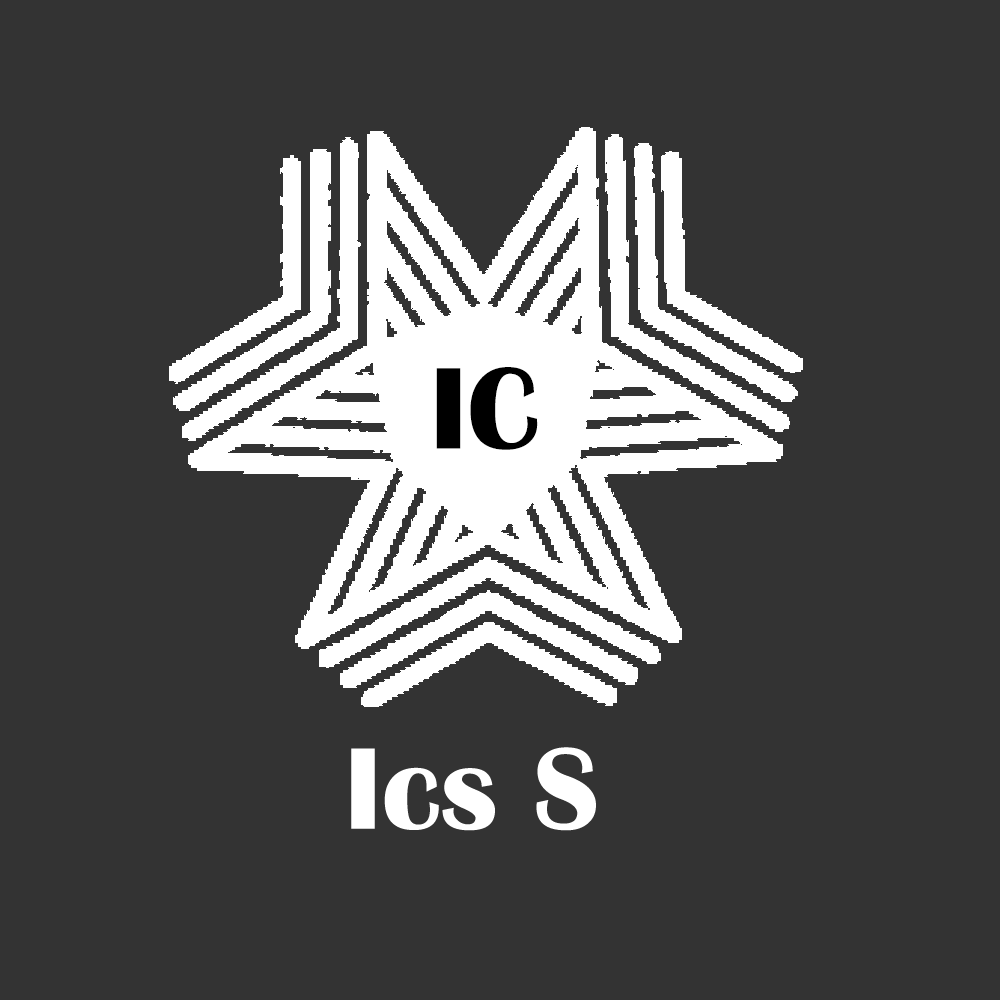
<style>
.page{position:relative;width:1000px;height:1000px;background:#333333}
.page>*{position:absolute;margin:0}
.t1{font:120px "BritannicBold";color:#000000}
.t2{font:120px "BritannicBold";color:#ffffff}
</style>
<div class="page">
<p class="t1" style="left:436px;top:367px;width:102px;height:83px">IC</p>
<p class="t2" style="left:351px;top:747px;width:245px;height:84px">Ics S</p>
</div>
